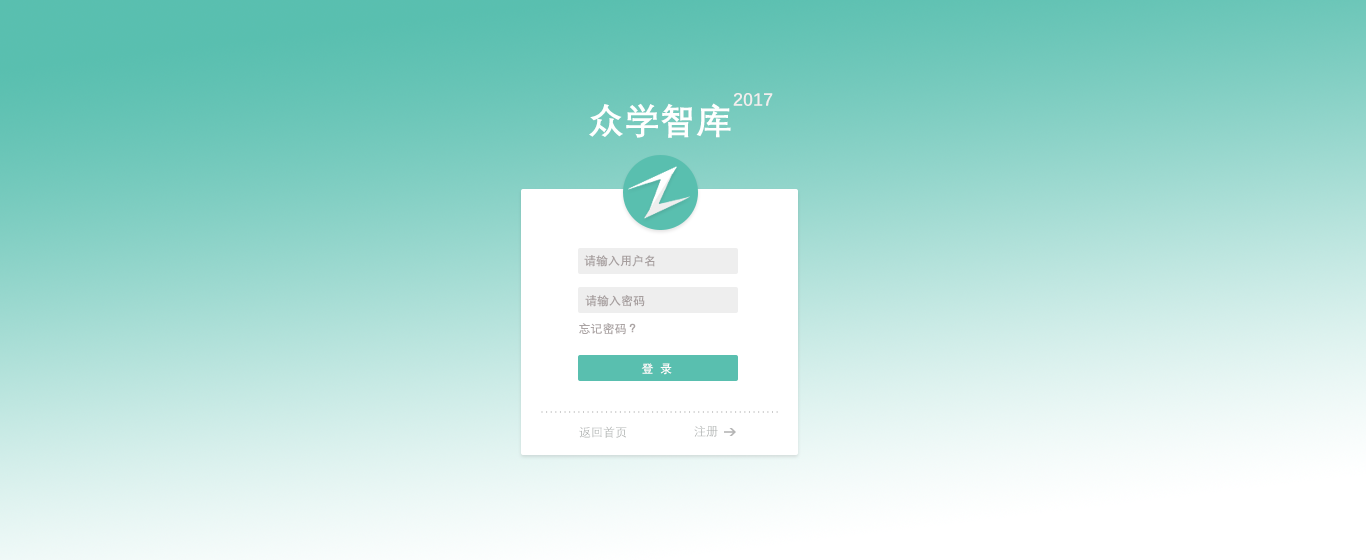
<style>
.page{position:relative;width:1366px;height:560px}
.page>*{position:absolute;margin:0}
.t1{font:18px "DengXian-Bold";color:#f2eded}
.t2{font:36px "DengXian-Bold";color:#ffffff}
.t3{font:12px "DengXian-Bold";color:#a69e9e}
.t4{font:12px "DengXian-Bold";color:#aba4a4}
.t5{font:12px "DengXian-Bold";color:#fdfbfb}
.t6{font:12px "DengXian-Regular";color:#aaadac}
</style>
<div class="page">
<p class="t1" style="left:733px;top:93px;width:40px;height:13px">2017</p>
<p class="t2" style="left:589px;top:103px;width:142px;height:35px">众学智库</p>
<p class="t3" style="left:584px;top:255px;width:71px;height:12px">请输入用户名</p>
<p class="t3" style="left:585px;top:295px;width:60px;height:12px">请输入密码</p>
<p class="t4" style="left:579px;top:323px;width:57px;height:12px">忘记密码？</p>
<p class="t5" style="left:641px;top:363px;width:31px;height:12px">登  录</p>
<p class="t6" style="left:694px;top:425px;width:24px;height:12px">注册</p>
<p class="t6" style="left:579px;top:426px;width:48px;height:12px">返回首页</p>
</div>
